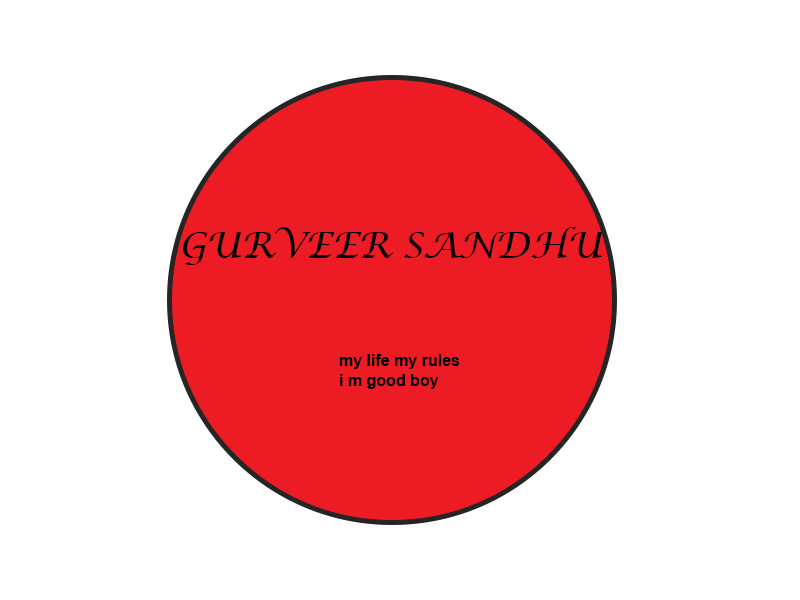
<style>
.page{position:relative;width:800px;height:600px;background:#ffffff}
.page>*{position:absolute;margin:0}
.t1{font:36px "LucidaCalligraphy-Italic";color:#000000}
.t2{font:16px/20px "Arial-BoldMT";color:#000000}
</style>
<div class="page">
<p class="t1" style="left:183px;top:227px;width:419px;height:38px">GURVEER SANDHU</p>
<p class="t2" style="left:339px;top:354px;width:121px;height:35px">my life my rules<br>i m good boy</p>
</div>
